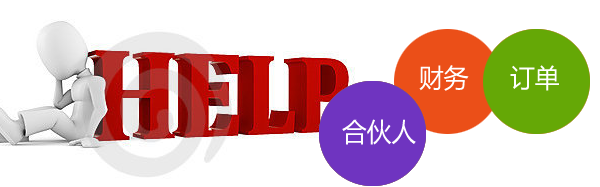
<style>
.page{position:relative;width:600px;height:187px;background:#ffffff}
.page>*{position:absolute;margin:0}
.t1{font:26px "MicrosoftYaHei";color:#ffffff;scale:0.95 1}
</style>
<div class="page">
<p class="t1" style="left:419px;top:65px;width:50px;height:26px">财务</p>
<p class="t1" style="left:510px;top:65px;width:49px;height:26px">订单</p>
<p class="t1" style="left:342px;top:119px;width:74px;height:26px">合伙人</p>
</div>
